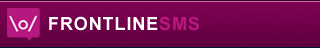
<style>
.page{position:relative;width:320px;height:48px}
.page>*{position:absolute;margin:0}
.t1{font:18px "Arial-BoldMT";letter-spacing:0.05em;color:#ffffff;text-transform:uppercase}
.t2{font:18px "Arial-BoldMT";letter-spacing:0.05em;color:#b7177f;text-transform:uppercase}
</style>
<div class="page">
<p class="t1" style="left:49px;top:16px;width:150px;height:15px">FRONTLINE<span class="t2">SMS</span></p>
</div>
